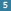
<style>
.page{position:relative;width:11px;height:11px;background:#347d9d}
.page>*{position:absolute;margin:0}
.t1{font:8px "Verdana";letter-spacing:0.02em;color:#ffffff}
</style>
<div class="page">
<p class="t1" style="left:3px;top:1px;width:5px;height:8px">5</p>
</div>
